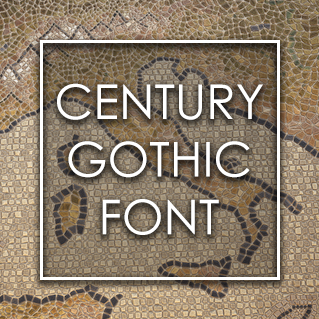
<style>
.page{position:relative;width:319px;height:319px}
.page>*{position:absolute;margin:0}
.t1{font:48px "CenturyGothic";color:#ffffff}
</style>
<div class="page">
<p class="t1" style="left:57px;top:83px;width:206px;height:152px;text-align:center">CENTURY<br>GOTHIC<br>FONT</p>
</div>
